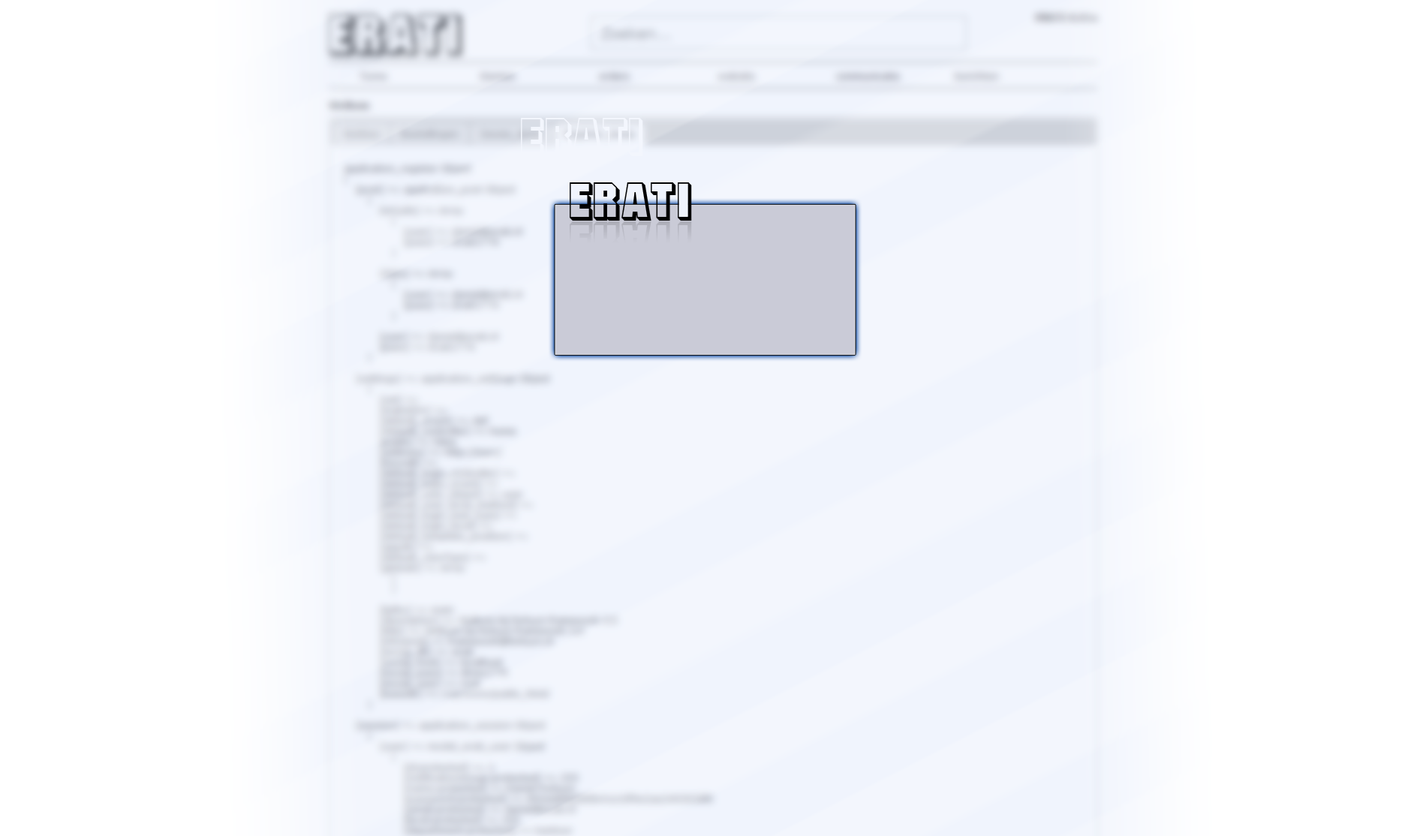
<style>
.page{position:relative;width:1426px;height:836px;background:#ffffff}
.page>*{position:absolute;margin:0}
.t1{font:54px "MisterBelvedere3D";color:#f3f6fd}
.t2{font:54px "MisterBelvedere3D";color:#000000}
.t3{font:54px "MisterBelvedere3D";color:#c0c1cd}
</style>
<div class="page">
<p class="t1" style="left:521px;top:118px;width:122px;height:38px">ERATI</p>
<p class="t2" style="left:570px;top:182px;width:122px;height:39px">ERATI</p>
<p class="t3" style="left:570px;top:221px;width:122px;height:39px">ERATI</p>
</div>
